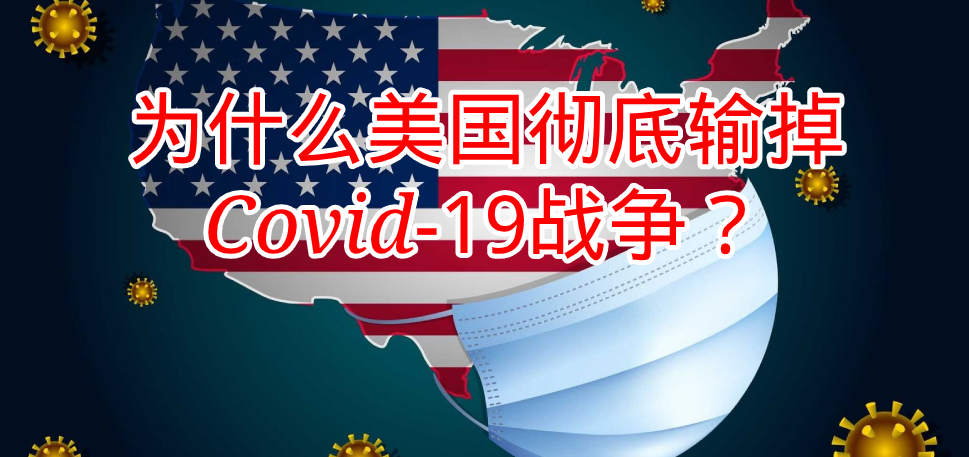
<style>
.page{position:relative;width:969px;height:457px}
.page>*{position:absolute;margin:0}
.t1{font:80px "DroidSansFallback";color:#ff0000}
.t2{font:80px "DroidSerif-Italic";color:#ff0000}
.t3{font:80px "DroidSans";color:#ff0000}
</style>
<div class="page">
<p class="t1" style="left:132px;top:92px;width:710px;height:169px;text-align:center">为什么美国彻底输掉<br><span class="t2">Covid</span><span class="t3">-19</span>战争？</p>
</div>
